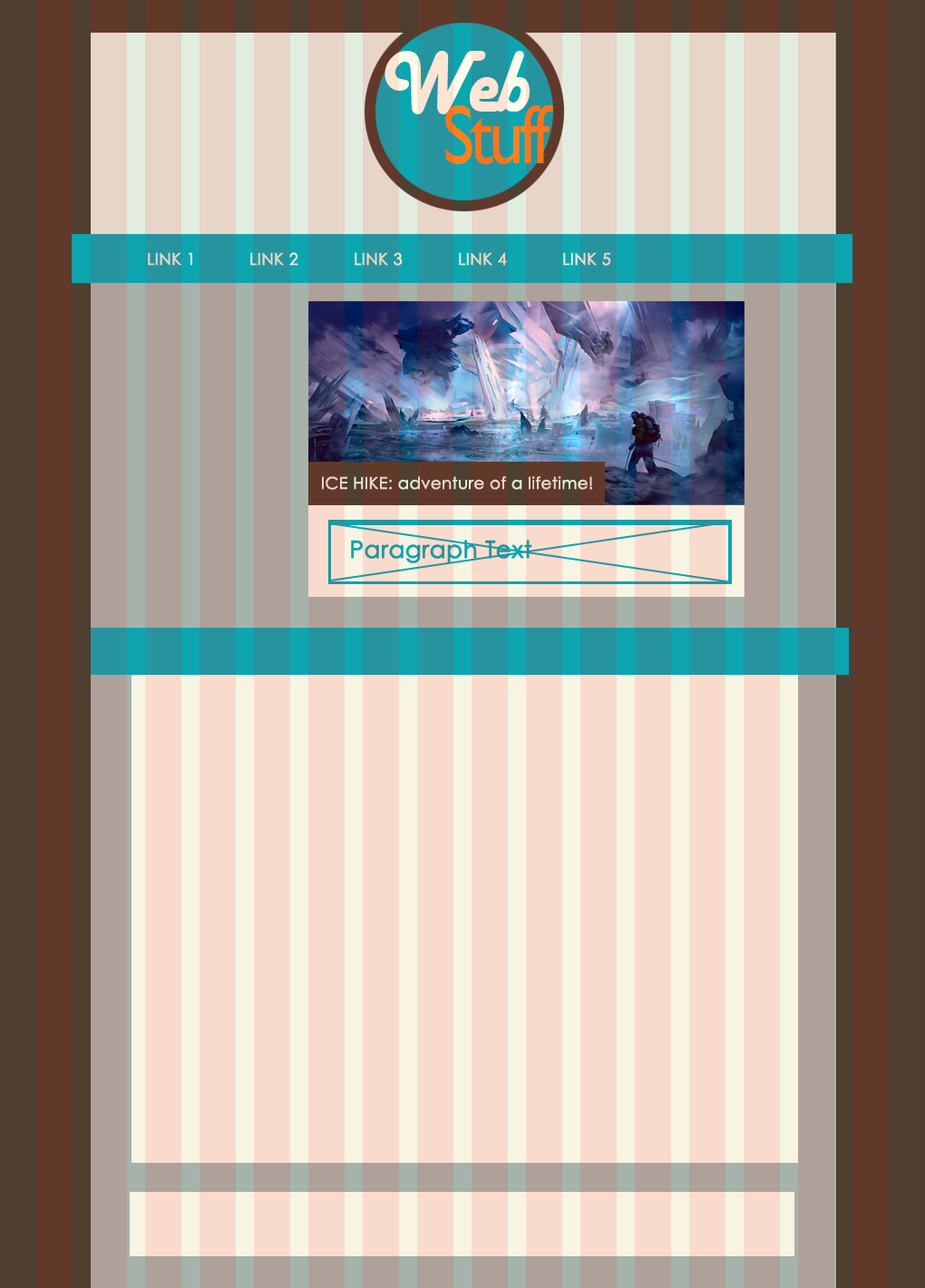
<style>
.page{position:relative;width:925px;height:1288px;background:#f9dbcd}
.page>*{position:absolute;margin:0}
.t1{font:16.3px "CenturyGothic";color:#e3eddf;font-weight:bold}
.t2{font:23.6px "CenturyGothic";font-weight:bold}
</style>
<div class="page">
<p class="t1" style="left:148px;top:252px;width:44px;height:14px">LINK 1</p>
<p class="t1" style="left:250px;top:252px;width:49px;height:14px">LINK 2</p>
<p class="t1" style="left:355px;top:252px;width:48px;height:14px">LINK 3</p>
<p class="t1" style="left:459px;top:252px;width:48px;height:14px">LINK 4</p>
<p class="t1" style="left:563px;top:252px;width:49px;height:14px">LINK 5</p>
<p class="t1" style="left:322px;top:476px;width:270px;height:14px">ICE HIKE: adventure of a lifetime!</p>
<p class="t2" style="left:351px;top:540px;width:182px;height:23px">Paragraph Text</p>
</div>
